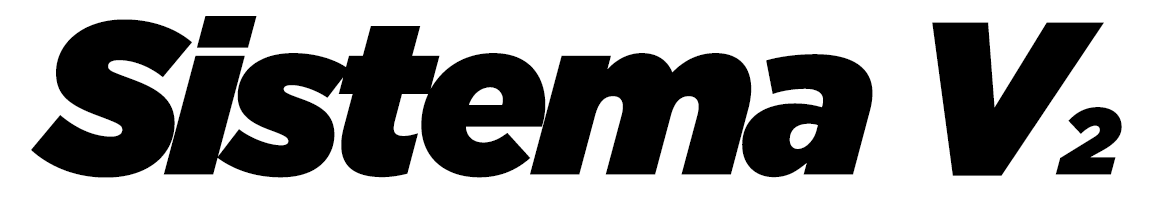
<style>
.page{position:relative;width:1152px;height:200px;background:#ffffff}
.page>*{position:absolute;margin:0}
.t1{font:217px "Gotham-UltraItalic";letter-spacing:-0.04em;color:#000000}
.t2{font:217px "Gotham-UltraItalic";letter-spacing:-0.075em;color:#000000}
.t3{font:94.8px "Gotham-UltraItalic";letter-spacing:-0.075em;color:#000000}
</style>
<div class="page">
<p class="t1" style="left:31px;top:16px;width:1091px;height:162px">Sistema <span class="t2">V</span><span class="t3">2</span></p>
</div>
